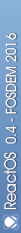
<style>
.page{position:relative;width:21px;height:233px}
.page>*{position:absolute;margin:0}
.t1{font:14px "AvantGardeITCbyBT-Book";color:#ffffff;scale:0.93 1}
.t2{font:16px "AvantGardeITCbyBT-Book";color:#ffffff;scale:0.93 1}
</style>
<div class="page">
<p class="t1" style="left:4px;top:33px;width:13px;height:177px;rotate:-90deg"><span class="t2">ReactOS</span>  0.4 - FOSDEM 2016</p>
</div>
